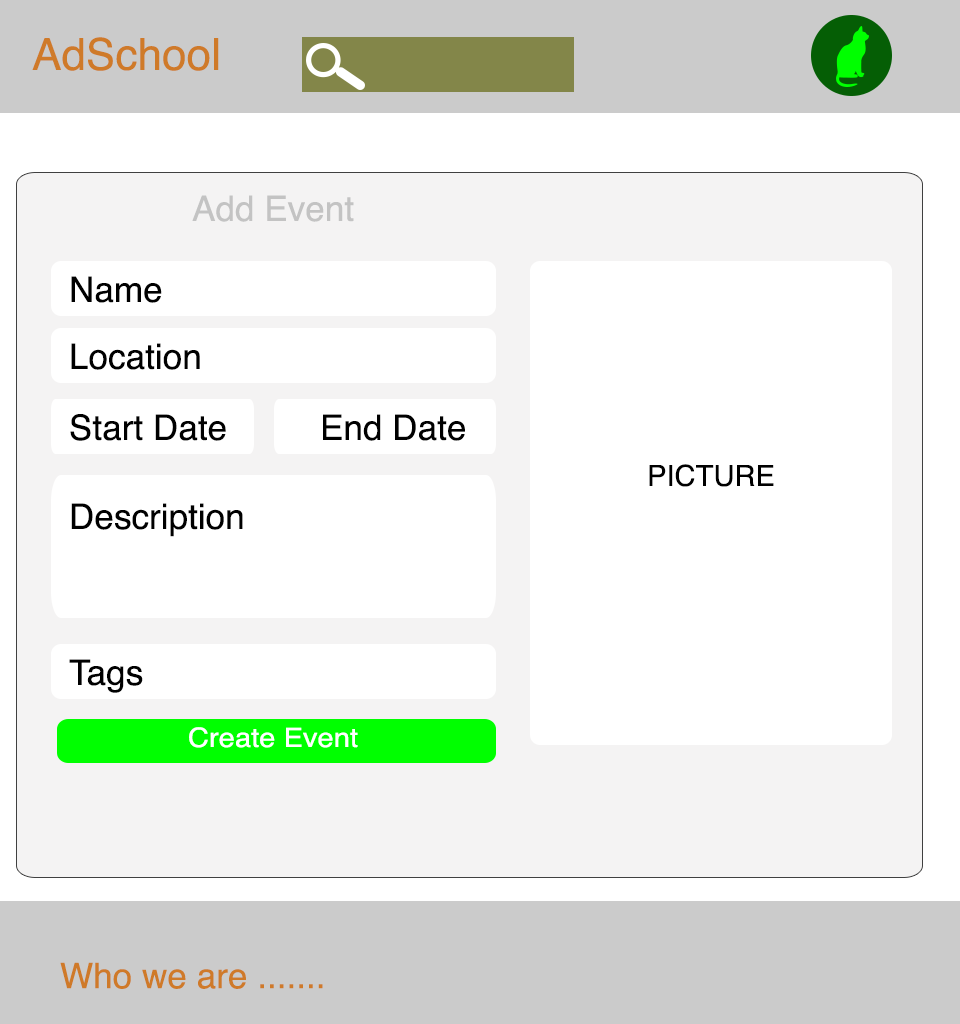
<style>
.page{position:relative;width:960px;height:1024px;background:#ffffff}
.page>*{position:absolute;margin:0}
.t1{font:44px "Helvetica";color:#cf7a29}
.t2{font:35.1px "Helvetica";color:#c3c3c3}
.t3{font:35.1px "Helvetica";color:#000000}
.t4{font:29.1px "Helvetica";color:#000000}
.t5{font:26.7px "Helvetica";color:#ffffff;scale:1.09 1}
.t6{font:35.1px "Helvetica";color:#cf7a29}
</style>
<div class="page">
<p class="t1" style="left:32px;top:37px;width:187px;height:34px">AdSchool</p>
<p class="t2" style="left:192px;top:195px;width:162px;height:27px">Add Event</p>
<p class="t3" style="left:71px;top:276px;width:91px;height:27px">Name</p>
<p class="t3" style="left:71px;top:343px;width:129px;height:27px">Location</p>
<p class="t3" style="left:70px;top:414px;width:156px;height:27px">Start Date</p>
<p class="t3" style="left:323px;top:414px;width:142px;height:27px">End Date</p>
<p class="t4" style="left:649px;top:464px;width:125px;height:23px">PICTURE</p>
<p class="t3" style="left:71px;top:503px;width:172px;height:34px">Description</p>
<p class="t3" style="left:69px;top:659px;width:74px;height:34px">Tags</p>
<p class="t5" style="left:189px;top:727px;width:169px;height:21px">Create Event</p>
<p class="t6" style="left:60px;top:962px;width:263px;height:27px">Who we are .......</p>
</div>
